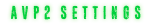
<style>
.page{position:relative;width:148px;height:25px;background:#ffffff}
.page>*{position:absolute;margin:0}
.t1{font:18.5px "Sunzoomspark";color:#00d03b}
</style>
<div class="page">
<p class="t1" style="left:11px;top:5px;width:130px;height:15px">A V P 2  S E T T I N G S</p>
</div>
